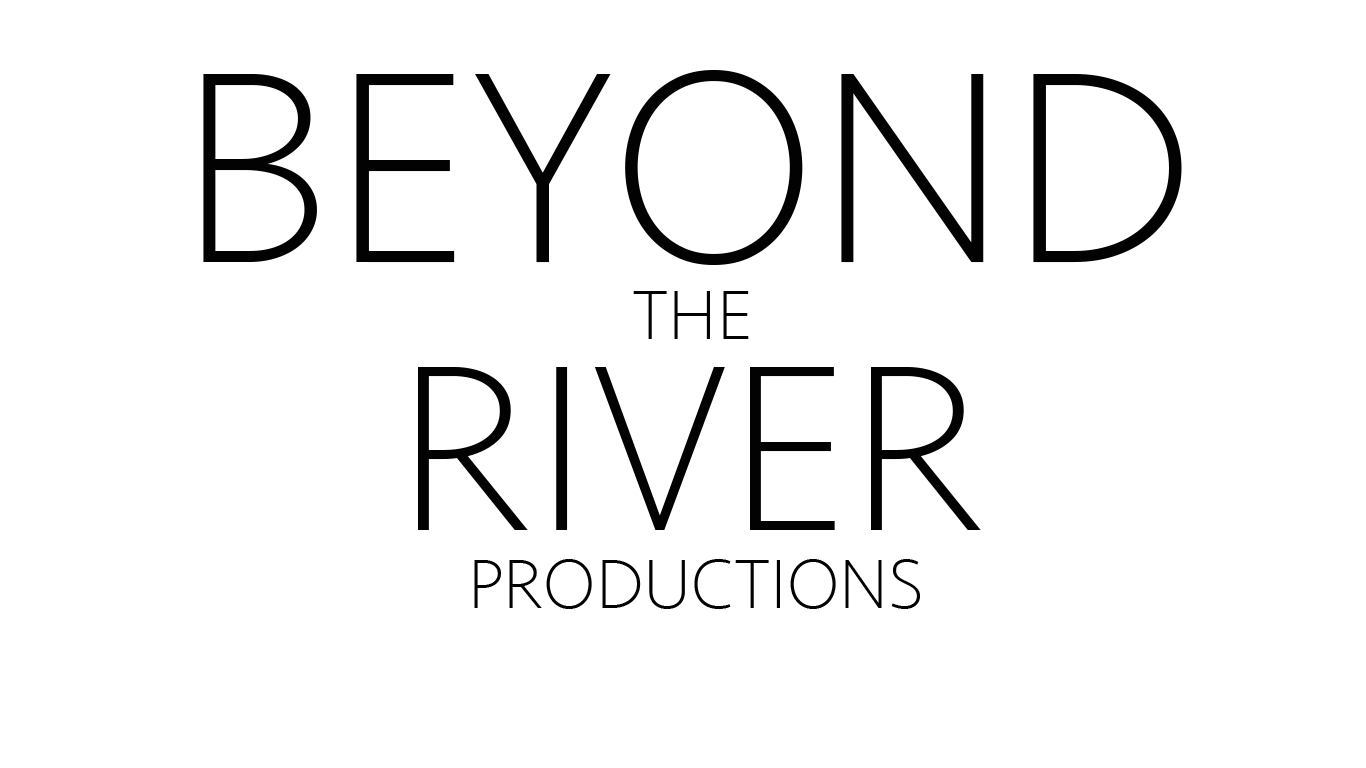
<style>
.page{position:relative;width:1366px;height:768px;background:#ffffff}
.page>*{position:absolute;margin:0}
.t1{font:282.6px "Seravek-ExtraLight";color:#020202}
.t2{font:72px "Seravek-ExtraLight";color:#020202}
.t3{font:244.6px "Seravek-ExtraLight";color:#020202}
</style>
<div class="page">
<p class="t1" style="left:203px;top:70px;width:979px;height:195px">BEYOND</p>
<p class="t2" style="left:633px;top:291px;width:116px;height:48px">THE</p>
<p class="t3" style="left:418px;top:367px;width:563px;height:163px">RIVER</p>
<p class="t2" style="left:474px;top:559px;width:446px;height:50px">PRODUCTIONS</p>
</div>
